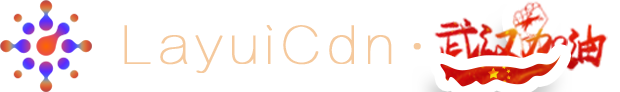
<style>
.page{position:relative;width:620px;height:92px;background:#ffffff}
.page>*{position:absolute;margin:0}
.t1{font:50px "FZLTCXHJW--GB1-0";letter-spacing:0.08em;color:#f6ca9d;font-weight:bold}
.t2{font:45.8px "MicrosoftYaHei";letter-spacing:0.08em;color:#f6ca9d;font-weight:bold}
</style>
<div class="page">
<p class="t1" style="left:124px;top:25px;width:268px;height:48px">LayuiCdn</p>
<p class="t2" style="left:413px;top:43px;width:8px;height:7px">·</p>
</div>
